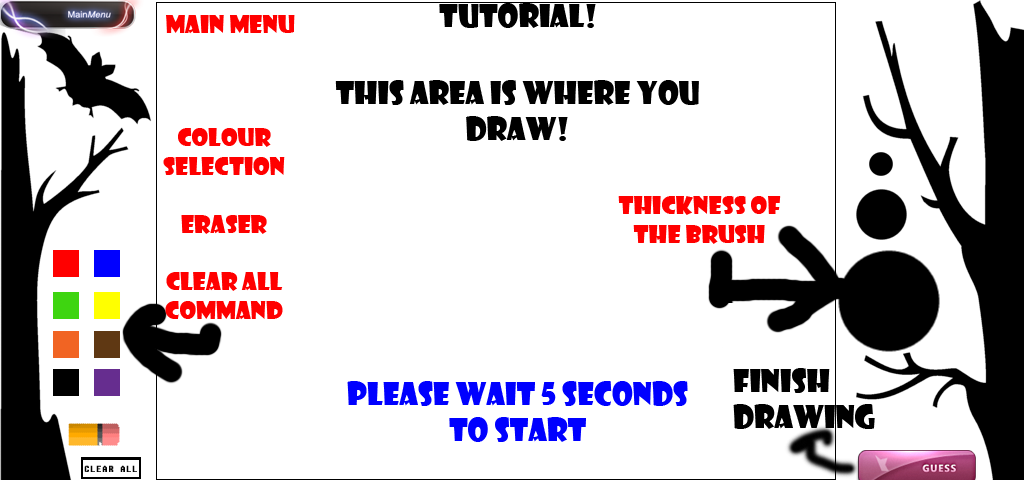
<style>
.page{position:relative;width:1024px;height:480px;background:#ffffff}
.page>*{position:absolute;margin:0}
.t1{font:30px "ShowcardGothic-Reg";color:#000000}
.t2{font:24px "ShowcardGothic-Reg";color:#ff0000}
.t3{font:30px "ShowcardGothic-Reg";color:#0000ff}
.t4{font:10px "FixedsysTTF";letter-spacing:0.05em;color:#000000;text-transform:uppercase}
</style>
<div class="page">
<p class="t1" style="left:439px;top:3px;width:157px;height:25px">Tutorial!</p>
<p class="t2" style="left:166px;top:15px;width:129px;height:19px">Main menu</p>
<p class="t1" style="left:335px;top:80px;width:364px;height:61px;text-align:center">This Area is where you draw!</p>
<p class="t2" style="left:163px;top:128px;width:122px;height:192px;text-align:center">colour <br>selection<br><br>Eraser<br><br>clear all command</p>
<p class="t2" style="left:618px;top:196px;width:163px;height:48px;text-align:center">Thickness of the brush</p>
<p class="t1" style="left:733px;top:368px;width:142px;height:61px">Finish Drawing</p>
<p class="t3" style="left:347px;top:381px;width:341px;height:61px;text-align:center">Please wait 5 seconds to start</p>
<p class="t4" style="left:84px;top:465px;width:53px;height:7px">clear all</p>
</div>
